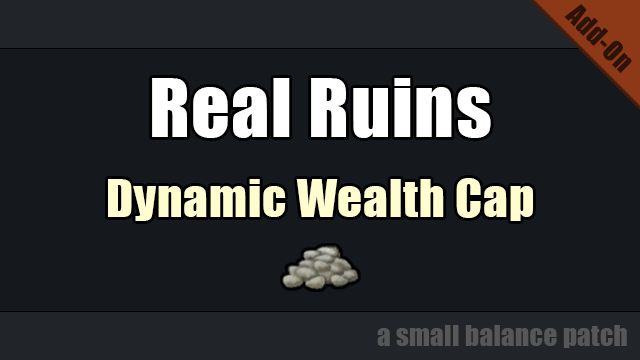
<style>
.page{position:relative;width:640px;height:360px;background:#15191d}
.page>*{position:absolute;margin:0}
.t1{font:26.7px "Impact";letter-spacing:0.02em;color:#2d1208}
.t2{font:48px/80px "Impact";letter-spacing:0.02em;color:#fffdcf}
.t3{font:74.7px/80px "Impact";letter-spacing:0.02em;color:#ffffff}
.t4{font:26.7px "Impact";letter-spacing:0.02em;color:#575757}
</style>
<div class="page">
<p class="t1" style="left:564px;top:4px;width:68px;height:69px;rotate:45deg">Add-On</p>
<p class="t2" style="left:108px;top:78px;width:425px;height:143px;text-align:center"><span class="t3">Real Ruins<br></span>Dynamic Wealth Cap</p>
<p class="t4" style="left:377px;top:325px;width:250px;height:23px">a small balance patch</p>
</div>
